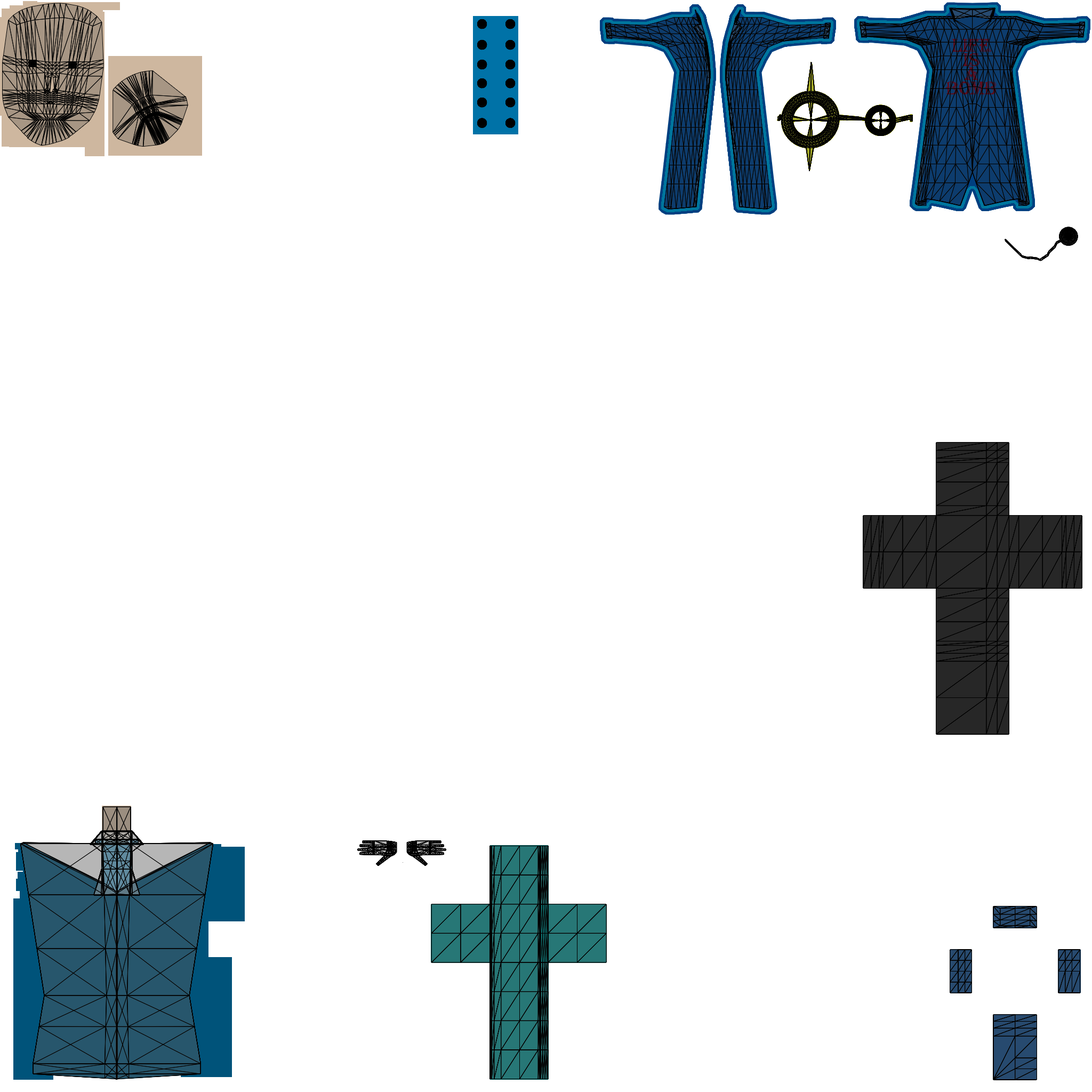
<style>
.page{position:relative;width:1092px;height:1092px;background:#ffffff}
.page>*{position:absolute;margin:0}
.t1{font:19.2px/7.1px "Algerian"}
</style>
<div class="page">
<p class="t1" style="left:946px;top:39px;width:50px;height:55px;text-align:center">Life<br><br>is<br><br>a<br><br>Bomb</p>
</div>
